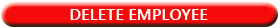
<style>
.page{position:relative;width:280px;height:28px;background:#f60b0b}
.page>*{position:absolute;margin:0}
.t1{font:16.4px "YuGothicUI-Bold";color:#ffffff}
</style>
<div class="page">
<p class="t1" style="left:70px;top:9px;width:138px;height:11px">DELETE EMPLOYEE</p>
</div>
